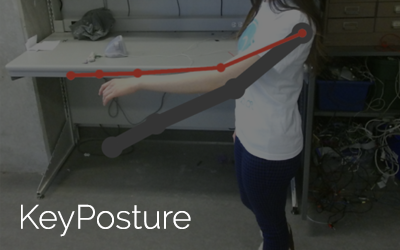
<style>
.page{position:relative;width:400px;height:250px}
.page>*{position:absolute;margin:0}
.t1{font:33.3px "Raleway-Light";color:#ffffff}
</style>
<div class="page">
<p class="t1" style="left:21px;top:204px;width:170px;height:33px">KeyPosture</p>
</div>
